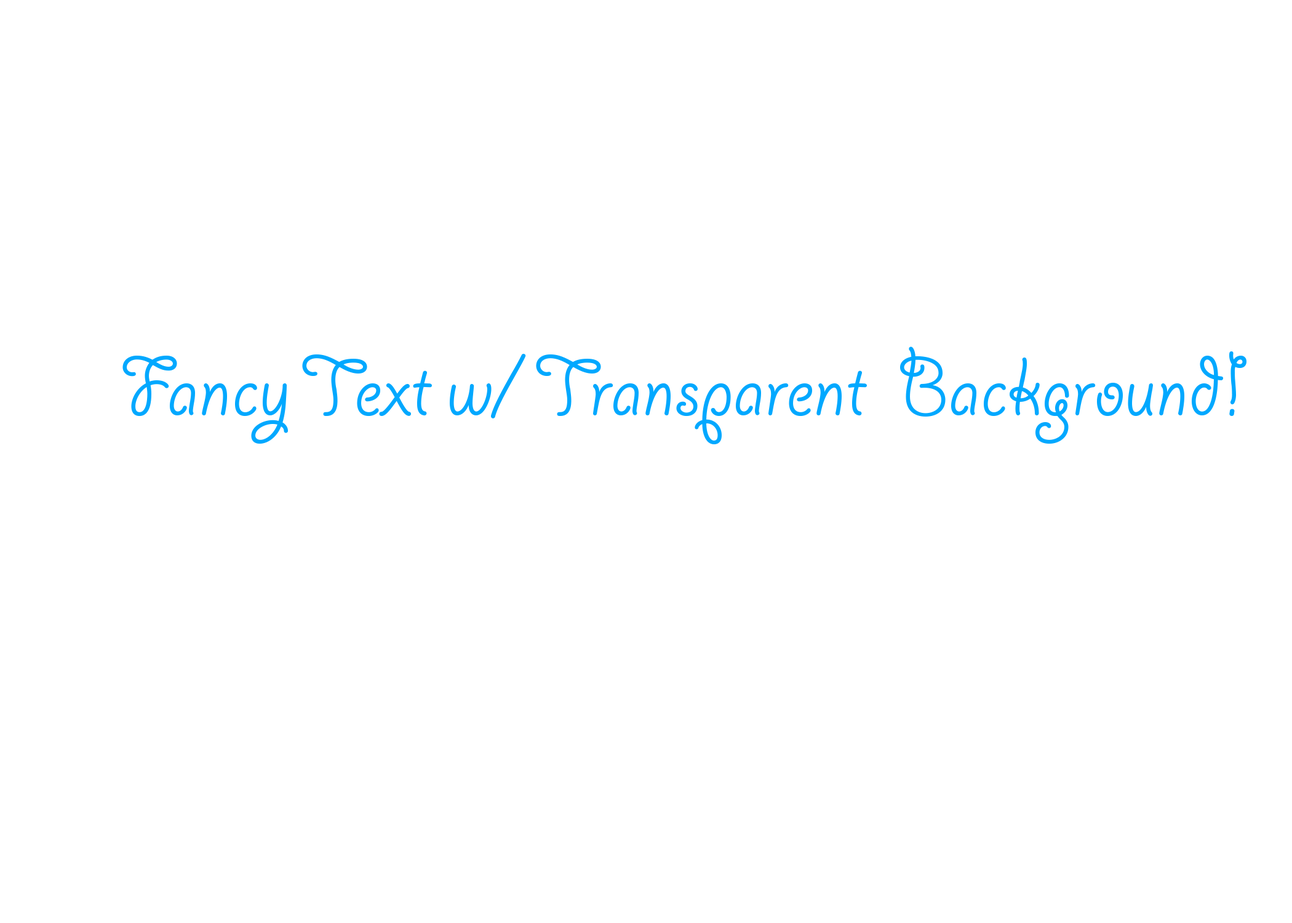
<style>
.page{position:relative;width:1292px;height:923px;background:#ffffff}
.page>*{position:absolute;margin:0}
.t1{font:92.3px "GiddyupStd";color:#00a8ff}
</style>
<div class="page">
<p class="t1" style="left:122px;top:346px;width:1125px;height:98px">Fancy Text w/ Transparent  Background!</p>
</div>
